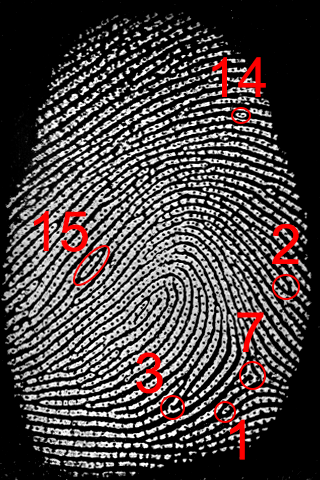
<style>
.page{position:relative;width:320px;height:480px;background:#000000}
.page>*{position:absolute;margin:0}
.t1{font:55.6px "ArialMT";color:#ff0000}
</style>
<div class="page">
<p class="t1" style="left:212px;top:57px;width:54px;height:40px">14</p>
<p class="t1" style="left:34px;top:211px;width:54px;height:41px">15</p>
<p class="t1" style="left:272px;top:224px;width:27px;height:40px">2</p>
<p class="t1" style="left:237px;top:312px;width:27px;height:40px">7</p>
<p class="t1" style="left:136px;top:352px;width:27px;height:42px">3</p>
<p class="t1" style="left:230px;top:419px;width:15px;height:41px">1</p>
</div>
